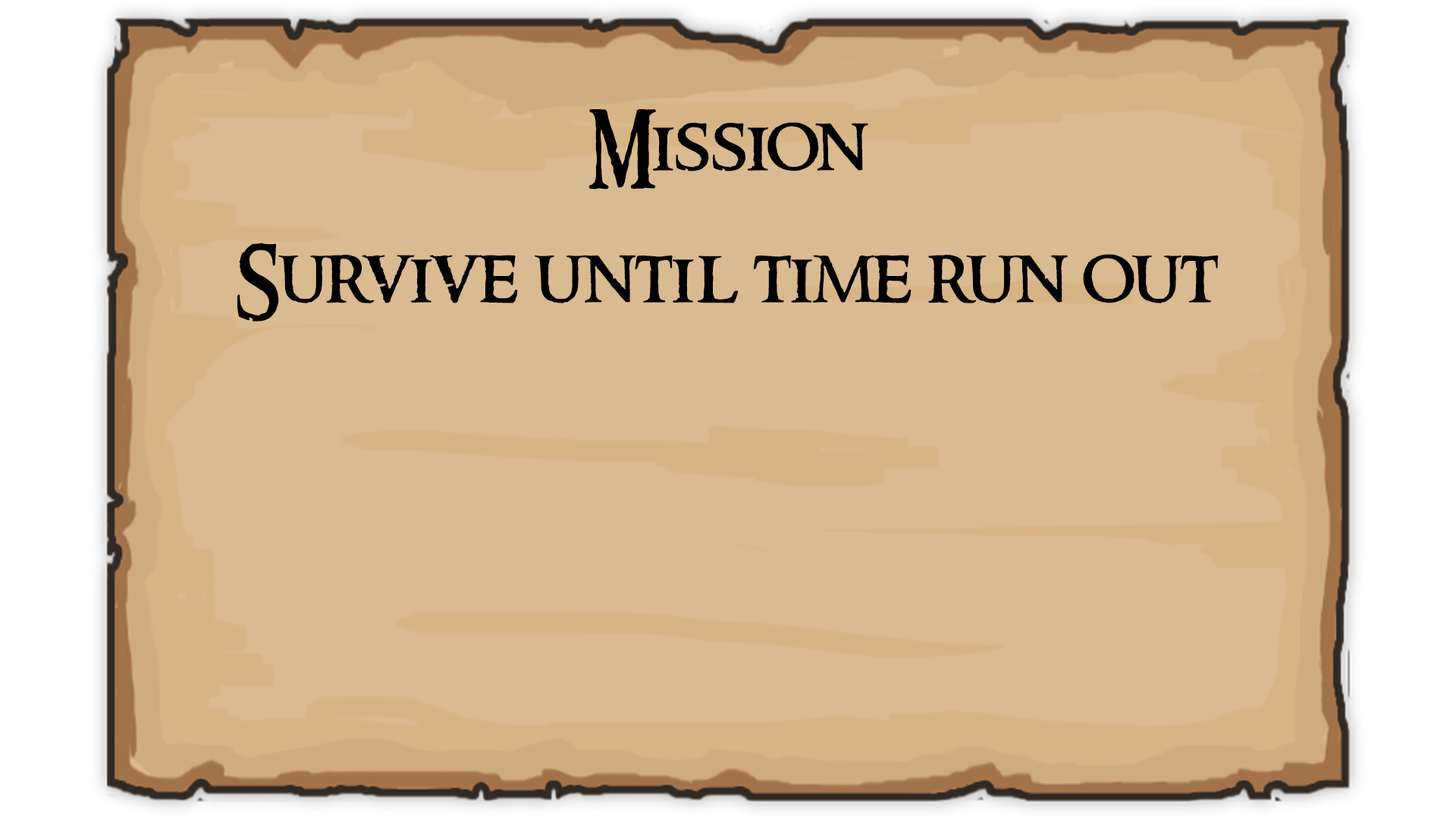
<style>
.page{position:relative;width:1456px;height:819px;background:#daba91}
.page>*{position:absolute;margin:0}
.t1{font:75.8px "RingbearerMedium";color:#000000}
</style>
<div class="page">
<p class="t1" style="left:588px;top:109px;width:280px;height:81px">Mission</p>
<p class="t1" style="left:237px;top:243px;width:982px;height:79px">Survive until time run out</p>
</div>
